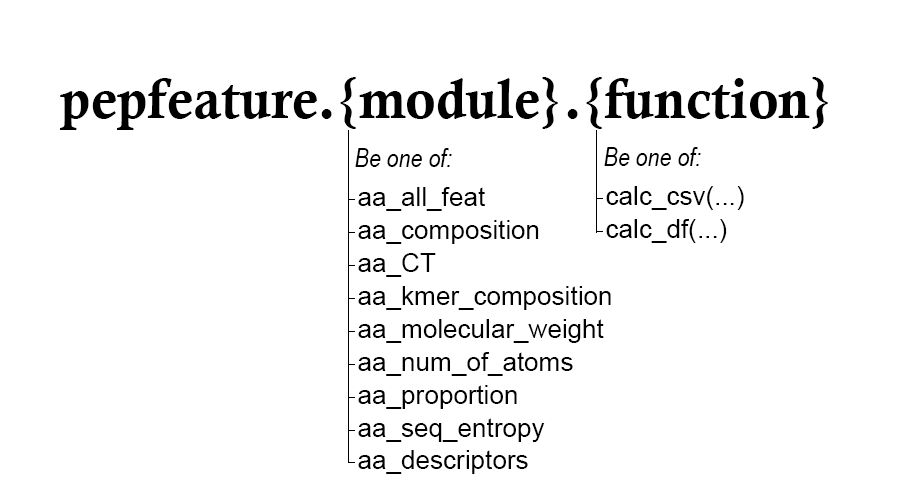
<style>
.page{position:relative;width:908px;height:488px;background:#ffffff}
.page>*{position:absolute;margin:0}
.t1{font:56px "CalisMTBol";color:#000000}
.t2{font:26.1px "ArialNarrow-Italic";color:#000000}
.t3{font:26.1px "ArialMT";color:#000000}
</style>
<div class="page">
<p class="t1" style="left:60px;top:77px;width:768px;height:53px">pepfeature.{module}.{function}</p>
<p class="t2" style="left:355px;top:148px;width:97px;height:19px">Be one of:</p>
<p class="t2" style="left:604px;top:147px;width:97px;height:19px">Be one of:</p>
<p class="t3" style="left:358px;top:187px;width:127px;height:24px">aa_all_feat</p>
<p class="t3" style="left:606px;top:186px;width:138px;height:24px">calc_csv(...)</p>
<p class="t3" style="left:358px;top:220px;width:181px;height:24px">aa_composition</p>
<p class="t3" style="left:606px;top:219px;width:121px;height:24px">calc_df(...)</p>
<p class="t3" style="left:358px;top:253px;width:78px;height:24px">aa_CT</p>
<p class="t3" style="left:358px;top:286px;width:253px;height:24px">aa_kmer_composition</p>
<p class="t3" style="left:358px;top:319px;width:246px;height:24px">aa_molecular_weight</p>
<p class="t3" style="left:358px;top:352px;width:215px;height:24px">aa_num_of_atoms</p>
<p class="t3" style="left:358px;top:385px;width:159px;height:24px">aa_proportion</p>
<p class="t3" style="left:358px;top:418px;width:187px;height:24px">aa_seq_entropy</p>
<p class="t3" style="left:358px;top:450px;width:170px;height:24px">aa_descriptors</p>
</div>
